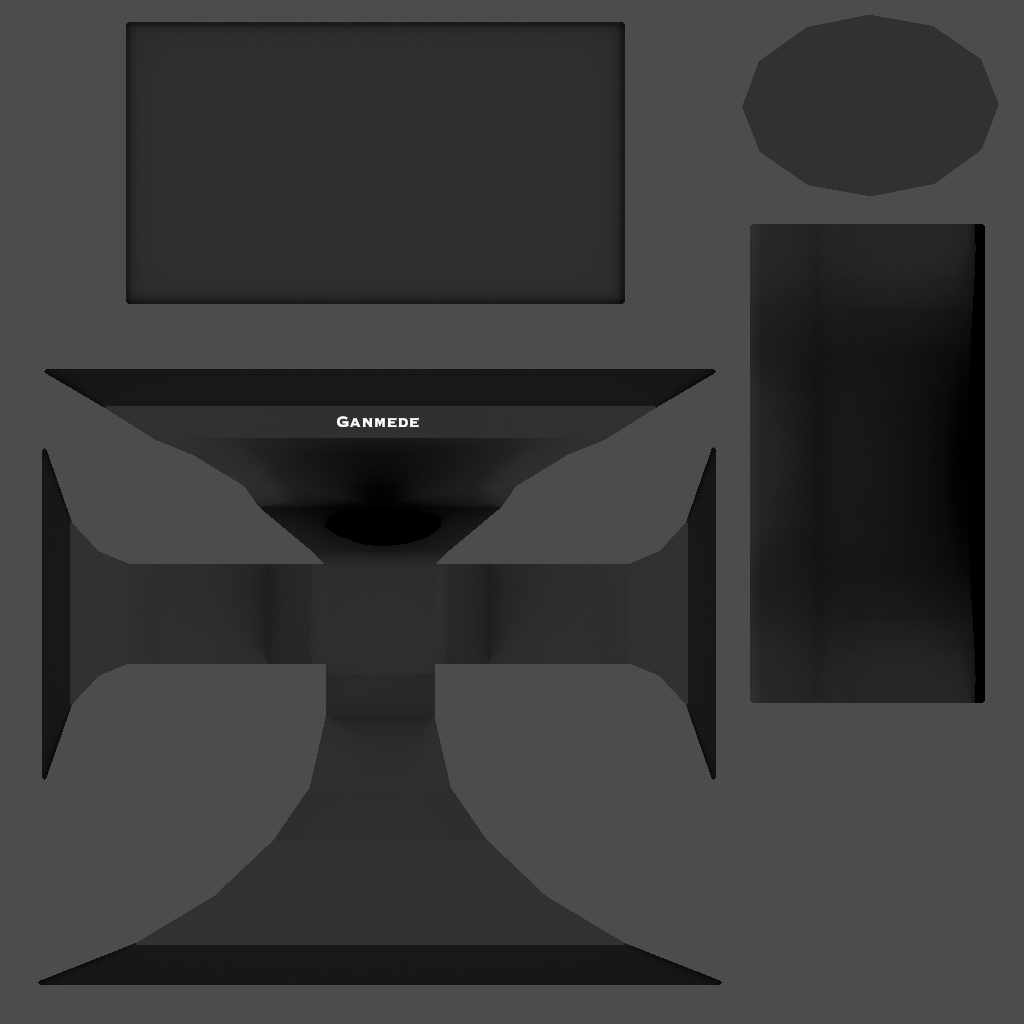
<style>
.page{position:relative;width:1024px;height:1024px;background:#4c4c4c}
.page>*{position:absolute;margin:0}
.t1{font:20px "Copperplate-Bold";color:#ffffff;scale:0.9 1}
</style>
<div class="page">
<p class="t1" style="left:337px;top:416px;width:82px;height:12px">Ganmede</p>
</div>
